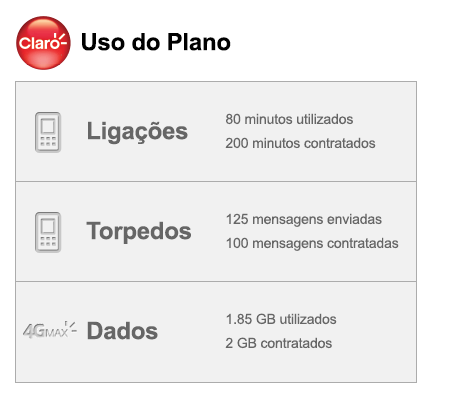
<style>
.page{position:relative;width:450px;height:410px;background:#f1f1f1}
.page>*{position:absolute;margin:0}
.t1{font:24px "Arial-BoldMT";letter-spacing:-0.01em;color:#000000}
.t2{font:14px/19px "ArialMT";letter-spacing:-0.01em;color:#666666}
.t3{font:24px "Arial-BoldMT";letter-spacing:-0.01em;color:#666666}
</style>
<div class="page">
<p class="t1" style="left:82px;top:33px;width:149px;height:18px">Uso do Plano</p>
<p class="t2" style="left:225px;top:113px;width:151px;height:36px">80 minutos utilizados<br>200 minutos contratados</p>
<p class="t3" style="left:88px;top:121px;width:100px;height:24px">Ligações</p>
<p class="t3" style="left:86px;top:221px;width:105px;height:23px">Torpedos</p>
<p class="t2" style="left:226px;top:213px;width:173px;height:38px">125 mensagens enviadas<br>100 mensagens contratadas</p>
<p class="t2" style="left:225px;top:313px;width:112px;height:36px">1.85 GB utilizados<br>2 GB contratados</p>
<p class="t3" style="left:87px;top:321px;width:71px;height:19px">Dados</p>
</div>
